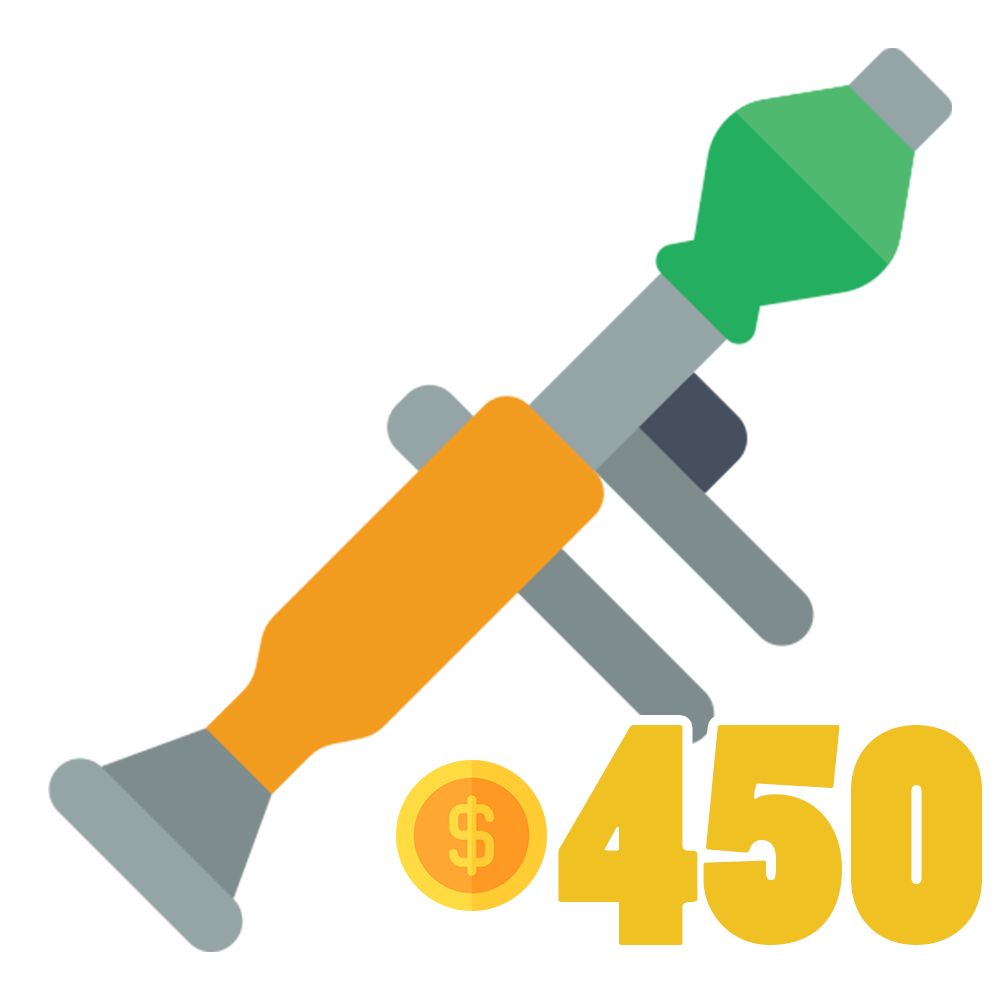
<style>
.page{position:relative;width:1000px;height:1000px;background:#ffffff}
.page>*{position:absolute;margin:0}
.t1{font:297.3px "PoplarStd";color:#efc122;scale:1.06 1}
</style>
<div class="page">
<p class="t1" style="left:558px;top:725px;width:424px;height:221px">450</p>
</div>
